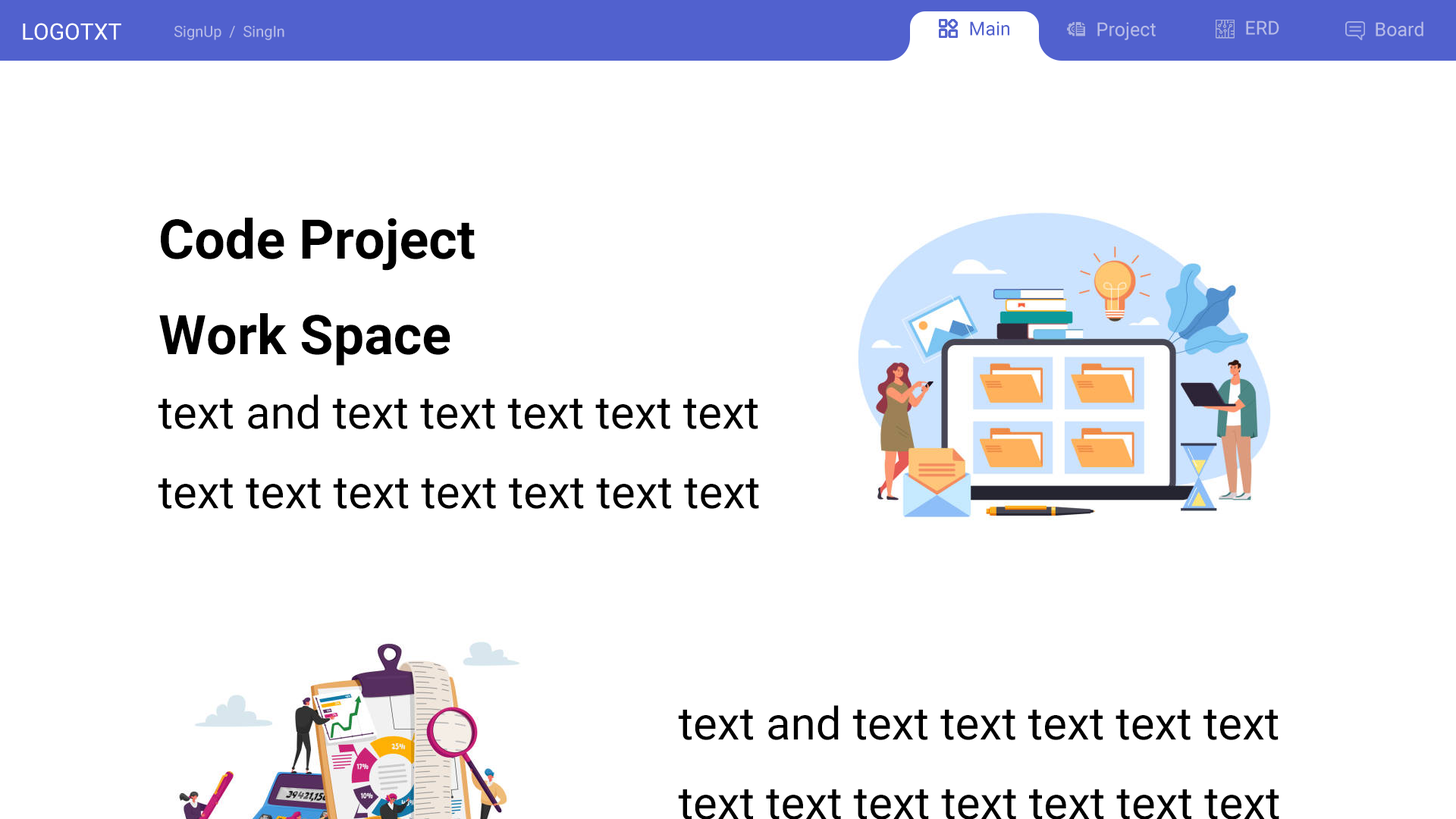
<style>
.page{position:relative;width:1456px;height:819px;background:#ffffff}
.page>*{position:absolute;margin:0}
.t1{font:22.7px "Roboto-Regular";color:#ffffff}
.t2{font:15.2px "Roboto-Regular";color:#b6bbe7}
.t3{font:19px "Roboto-Regular";color:#5161ce}
.t4{font:19px "Roboto-Regular";color:#b6bbe7}
.t5{font:54.6px "Roboto-Bold";color:#000000}
.t6{font:45.5px "Roboto-Regular";color:#000000}
</style>
<div class="page">
<p class="t1" style="left:23px;top:23px;width:98px;height:17px">LOGOTXT</p>
<p class="t2" style="left:174px;top:26px;width:110px;height:14px">SignUp  /  SingIn</p>
<p class="t3" style="left:970px;top:21px;width:39px;height:15px">Main</p>
<p class="t4" style="left:1097px;top:22px;width:59px;height:18px">Project</p>
<p class="t4" style="left:1246px;top:20px;width:33px;height:15px">ERD</p>
<p class="t4" style="left:1376px;top:21px;width:47px;height:15px">Board</p>
<p class="t5" style="left:159px;top:218px;width:316px;height:148px">Code Project<br>Work Space</p>
<p class="t6" style="left:158px;top:394px;width:601px;height:115px">text and text text text text text<br>text text text text text text text</p>
<p class="t6" style="left:678px;top:705px;width:601px;height:115px">text and text text text text text<br>text text text text text text text</p>
</div>
